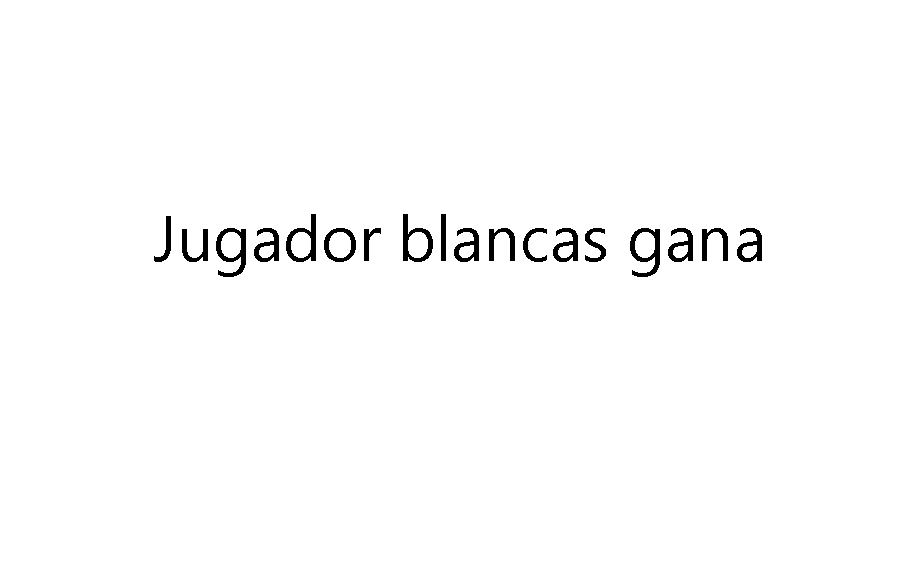
<style>
.page{position:relative;width:902px;height:563px;background:#ffffff}
.page>*{position:absolute;margin:0}
.t1{font:64px "MicrosoftNewTaiLue";color:#000000}
</style>
<div class="page">
<p class="t1" style="left:154px;top:214px;width:608px;height:63px">Jugador blancas gana</p>
</div>
